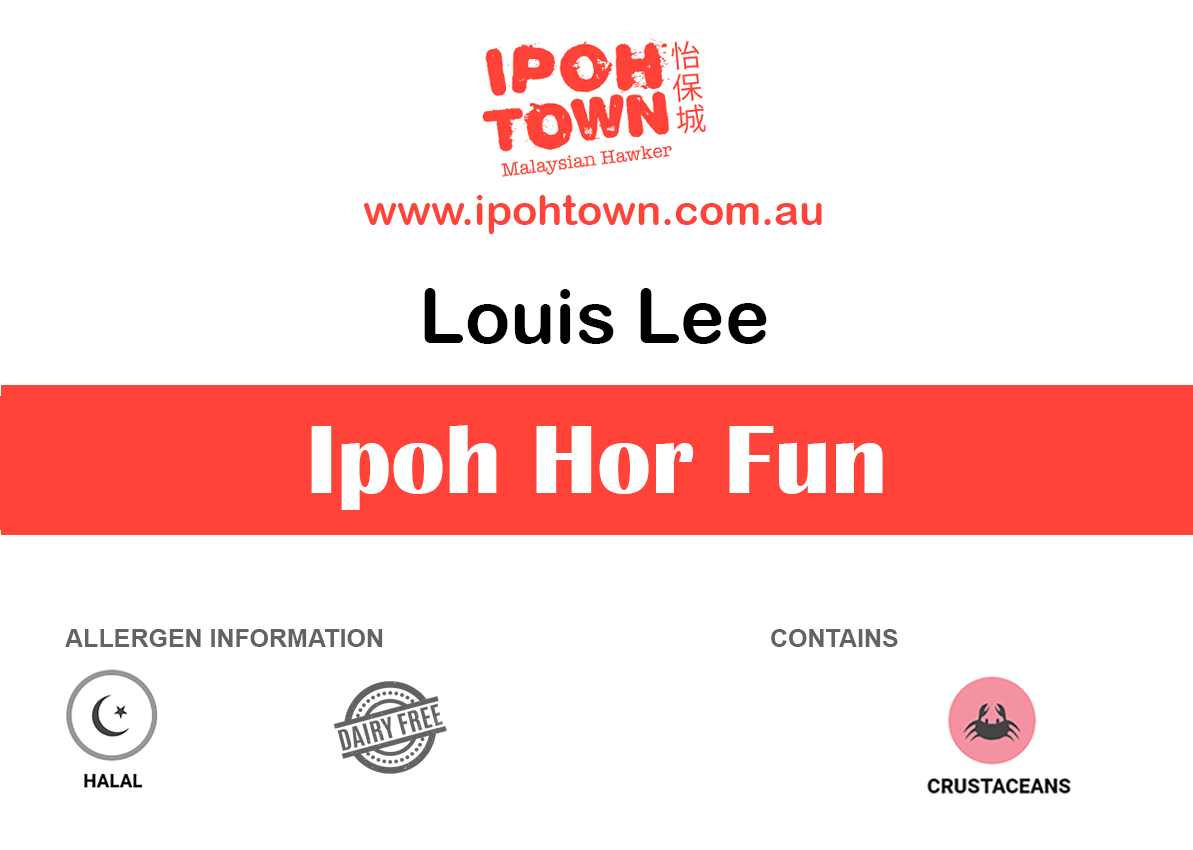
<style>
.page{position:relative;width:1193px;height:850px;background:#ffffff}
.page>*{position:absolute;margin:0}
.t1{font:41.7px "ArialRoundedMTBold";color:#ff4338}
.t2{font:75px "ArialRoundedMTBold";color:#000000}
.t3{font:100px "BritannicBold";color:#ffffff}
.t4{font:25px "Arial-BoldMT";color:#636363}
</style>
<div class="page">
<p class="t1" style="left:364px;top:195px;width:458px;height:39px">www.ipohtown.com.au</p>
<p class="t2" style="left:424px;top:288px;width:343px;height:56px">Louis Lee</p>
<p class="t3" style="left:311px;top:425px;width:572px;height:85px">Ipoh Hor Fun</p>
<p class="t4" style="left:65px;top:629px;width:318px;height:18px">ALLERGEN INFORMATION</p>
<p class="t4" style="left:771px;top:629px;width:127px;height:18px">CONTAINS</p>
</div>
